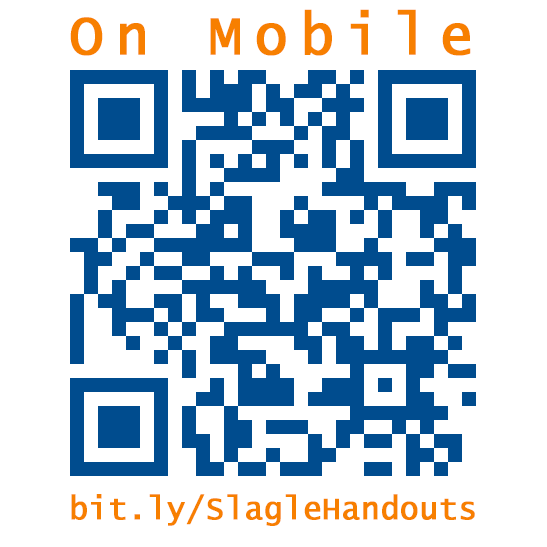
<style>
.page{position:relative;width:547px;height:547px;background:#ffffff}
.page>*{position:absolute;margin:0}
.t1{font:57.3px "LucidaConsole";letter-spacing:0.212em;color:#f77f00;font-weight:bold;scale:0.96 1}
.t2{font:32.2px "LucidaConsole";color:#f77f00;font-weight:bold;scale:0.96 1}
</style>
<div class="page">
<p class="t1" style="left:70px;top:9px;width:401px;height:47px">On Mobile</p>
<p class="t2" style="left:71px;top:494px;width:404px;height:32px">bit.ly/SlagleHandouts</p>
</div>
